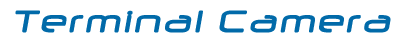
<style>
.page{position:relative;width:400px;height:50px;background:#ffffff}
.page>*{position:absolute;margin:0}
.t1{font:36px "Neuropol";letter-spacing:0.075em;color:#016aa9;font-weight:bold;font-style:italic}
</style>
<div class="page">
<p class="t1" style="left:15px;top:10px;width:376px;height:23px">Terminal Camera</p>
</div>
